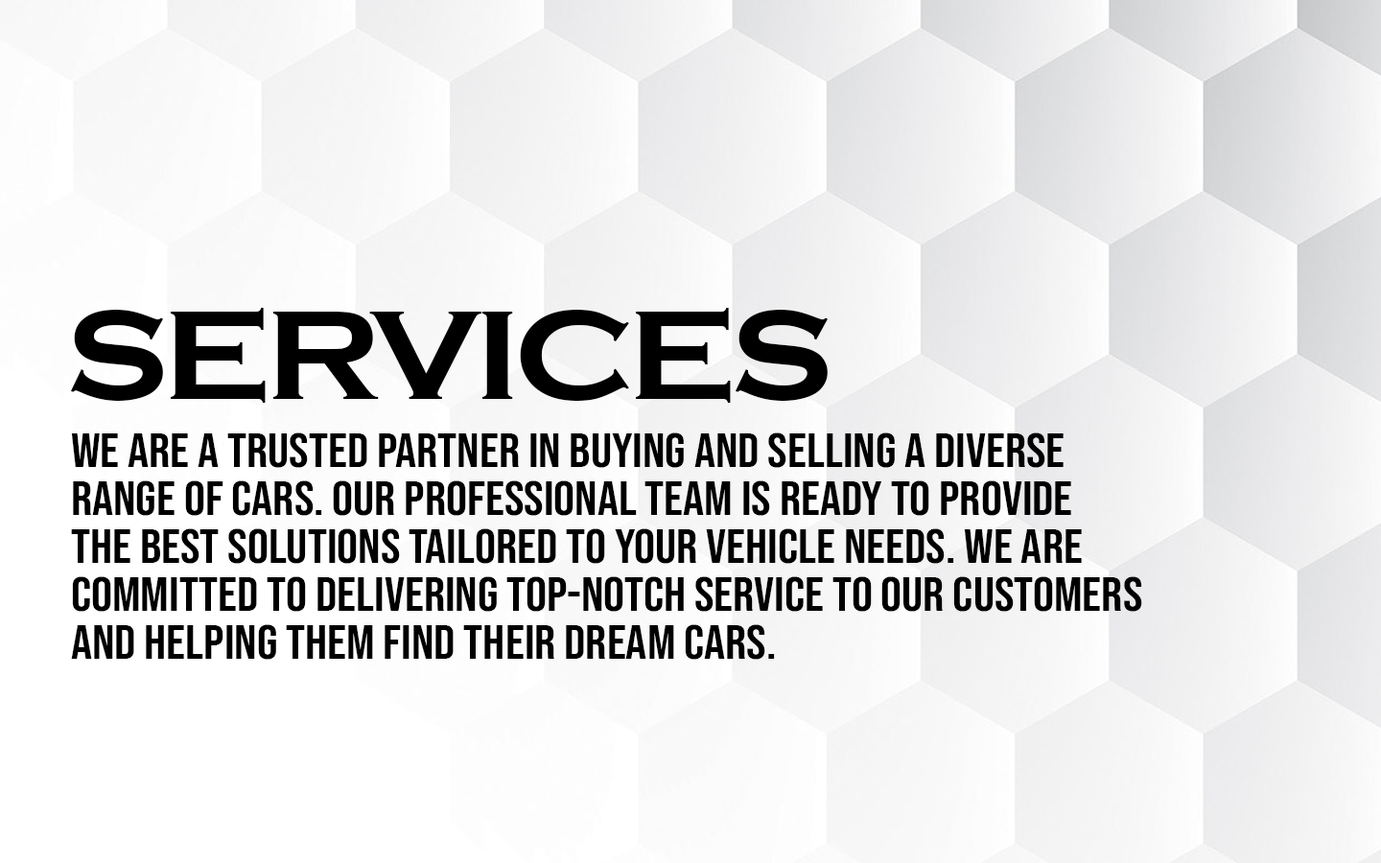
<style>
.page{position:relative;width:1381px;height:863px}
.page>*{position:absolute;margin:0}
.t1{font:131.1px "CopperplateGothic-Bold";letter-spacing:-0.05em;color:#000000;text-transform:uppercase;scale:1.1 1}
.t2{font:48px/48px "BebasNeue-Regular";color:#000000;text-transform:uppercase;scale:1.1 1}
</style>
<div class="page">
<p class="t1" style="left:70px;top:308px;width:759px;height:95px">Services</p>
<p class="t2" style="left:71px;top:433px;width:1071px;height:227px">We are a trusted partner in buying and selling a diverse <br>range of cars. Our professional team is ready to provide <br>the best solutions tailored to your vehicle needs. We are <br>committed to delivering top-notch service to our customers <br>and helping them find their dream cars.</p>
</div>
